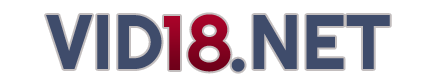
<style>
.page{position:relative;width:440px;height:81px;background:#ffffff}
.page>*{position:absolute;margin:0}
.t1{font:77px "Righteous-Regular";color:#3f4c6b}
.t2{font:77px "Righteous-Regular"}
</style>
<div class="page">
<p class="t1" style="left:46px;top:15px;width:344px;height:57px">VID   .NET</p>
<p class="t2" style="left:164px;top:14px;width:67px;height:58px">18</p>
</div>
